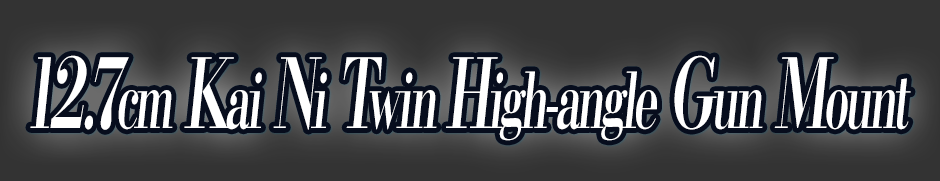
<style>
.page{position:relative;width:940px;height:181px;background:#333333}
.page>*{position:absolute;margin:0}
.t1{font:76.8px "KochoStd-Heavy";letter-spacing:-0.08em;color:#ffffff;font-style:italic;scale:0.59 1}
.t2{font:96px "KochoStd-Heavy";letter-spacing:-0.08em;color:#ffffff;font-style:italic;scale:0.59 1}
</style>
<div class="page">
<p class="t1" style="left:30px;top:55px;width:881px;height:86px"><span class="t2">12.7</span>cm<span class="t2"> K</span>ai<span class="t2"> N</span>i<span class="t2"> T</span>win <span class="t2">H</span>igh-angle<span class="t2"> G</span>un<span class="t2"> M</span>ount</p>
</div>
